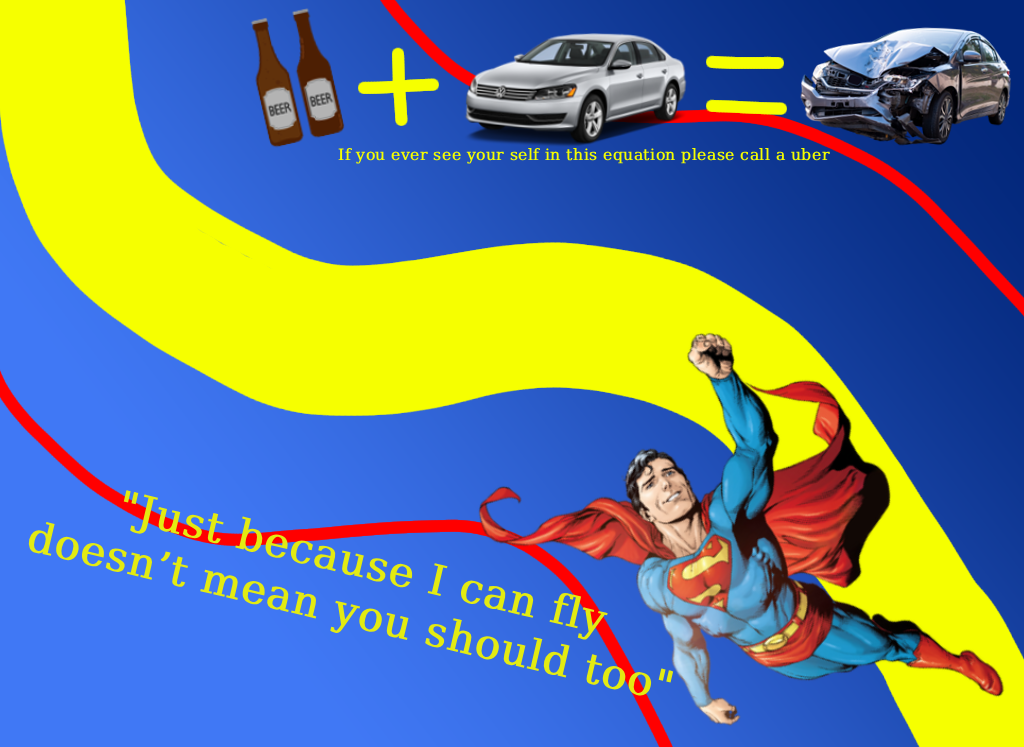
<style>
.page{position:relative;width:1024px;height:747px;background:#f6ff00}
.page>*{position:absolute;margin:0}
.t1{font:15.7px "DejaVuSerif";color:#f5fe00;font-weight:bold}
.t2{font:42.1px "DejaVuSerif";color:#e3eb12;font-weight:bold}
</style>
<div class="page">
<p class="t1" style="left:338px;top:148px;width:492px;height:16px">If you ever see your self in this equation please call a uber</p>
<p class="t2" style="left:28px;top:490px;width:646px;height:207px;text-align:center;rotate:13deg">"Just because I can fly<br>doesn’t mean you should too"</p>
</div>
